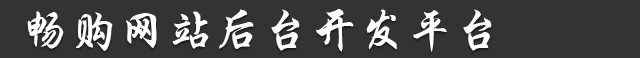
<style>
.page{position:relative;width:640px;height:58px;background:#333333}
.page>*{position:absolute;margin:0}
.t1{font:48px "STXingkai";color:#ffffff}
</style>
<div class="page">
<p class="t1" style="left:27px;top:9px;width:465px;height:43px">畅购网站后台开发平台</p>
</div>
